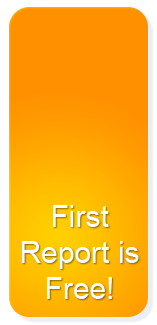
<style>
.page{position:relative;width:157px;height:325px;background:#ff9000}
.page>*{position:absolute;margin:0}
.t1{font:30px "ArialMT";color:#ffffff}
</style>
<div class="page">
<p class="t1" style="left:22px;top:205px;width:117px;height:94px;text-align:center">First Report is Free!</p>
</div>
